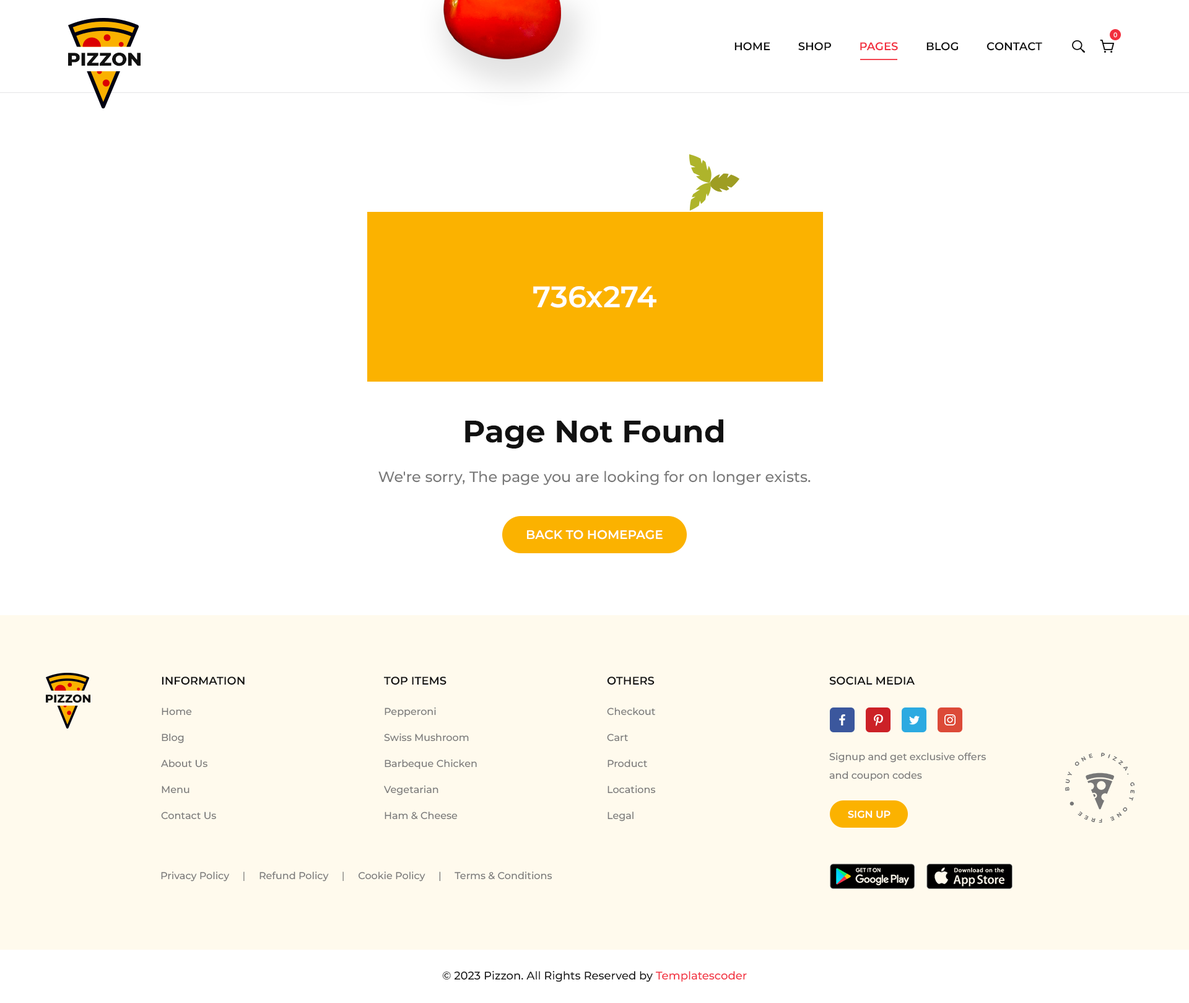
<style>
.page{position:relative;width:1189px;height:1003px;background:#ffffff}
.page>*{position:absolute;margin:0}
.t1{font:6.2px "Poppins-Regular";color:#ffffff}
.t2{font:18.3px "Montserrat-ExtraBold";color:#111111;text-transform:uppercase}
.t3{font:11.1px "Montserrat-SemiBold";color:#111111;text-transform:uppercase}
.t4{font:11.1px "Montserrat-SemiBold";color:#f22e3e;text-transform:uppercase}
.t5{font:29.7px "Montserrat-SemiBold";color:#ffffff}
.t6{font:31px "Montserrat-Bold";color:#111111}
.t7{font:14.9px "Montserrat-Medium";color:#777777}
.t8{font:12.4px "Montserrat-SemiBold";color:#ffffff;text-transform:uppercase}
.t9{font:11.3px "Montserrat-ExtraBold";color:#111111;text-transform:uppercase}
.t10{font:9.9px/26px "Montserrat-Medium";color:#777777}
.t11{font:9.9px/18.6px "Montserrat-Medium";color:#777777}
.t12{font:9.9px "Montserrat-SemiBold";color:#ffffff;text-transform:uppercase}
.t13{font:9.9px "Montserrat-Medium";color:#777777}
.t14{font:11.1px "Montserrat-Medium";color:#111111}
.t15{font:11.1px "Montserrat-Medium";color:#f22e3e}
</style>
<div class="page">
<p class="t1" style="left:1114px;top:32px;width:3px;height:6px">0</p>
<p class="t2" style="left:68px;top:53px;width:73px;height:13px">PIZZON</p>
<p class="t3" style="left:735px;top:42px;width:307px;height:9px">Home         Shop         <span class="t4">Pages</span>         Blog         Contact</p>
<p class="t5" style="left:533px;top:286px;width:124px;height:22px">736x274</p>
<p class="t6" style="left:465px;top:419px;width:258px;height:29px">Page Not Found</p>
<p class="t7" style="left:378px;top:470px;width:433px;height:15px">We're sorry, The page you are looking for on longer exists.</p>
<p class="t8" style="left:527px;top:530px;width:136px;height:9px">back To Homepage</p>
<p class="t3" style="left:162px;top:676px;width:83px;height:9px">Information</p>
<p class="t3" style="left:384px;top:676px;width:63px;height:9px">Top Items</p>
<p class="t3" style="left:607px;top:676px;width:48px;height:9px">Others</p>
<p class="t3" style="left:829px;top:676px;width:86px;height:9px">Social Media</p>
<p class="t9" style="left:46px;top:694px;width:44px;height:9px">PIZZON</p>
<p class="t10" style="left:161px;top:707px;width:55px;height:112px">Home<br>Blog<br>About Us<br>Menu<br>Contact Us</p>
<p class="t10" style="left:384px;top:707px;width:93px;height:112px">Pepperoni<br>Swiss Mushroom<br>Barbeque Chicken<br>Vegetarian<br>Ham &amp; Cheese</p>
<p class="t10" style="left:607px;top:707px;width:49px;height:114px">Checkout<br>Cart<br>Product<br>Locations<br>Legal</p>
<p class="t11" style="left:829px;top:752px;width:157px;height:28px">Signup and get exclusive offers<br>and coupon codes</p>
<p class="t12" style="left:848px;top:810px;width:43px;height:8px">Sign Up</p>
<p class="t13" style="left:161px;top:871px;width:391px;height:10px">Privacy Policy     |     Refund Policy     |     Cookie Policy     |     Terms &amp; Conditions</p>
<p class="t14" style="left:442px;top:971px;width:305px;height:11px">© 2023 Pizzon. All Rights Reserved by <span class="t15">Templatescoder</span></p>
</div>
